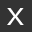
<style>
.page{position:relative;width:32px;height:32px;background:#333333}
.page>*{position:absolute;margin:0}
.t1{font:25.1px "MyriadPro-Regular";color:#ffffff;scale:1.27 1}
</style>
<div class="page">
<p class="t1" style="left:7px;top:8px;width:17px;height:17px">X</p>
</div>
